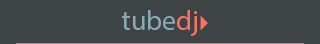
<style>
.page{position:relative;width:320px;height:44px;background:#3e4346}
.page>*{position:absolute;margin:0}
.t1{font:28px "MyriadPro-Regular";color:#89a9b4}
.t2{font:28px "MyriadPro-Regular";color:#fb7363}
</style>
<div class="page">
<p class="t1" style="left:122px;top:10px;width:75px;height:26px">tube<span class="t2">dj</span></p>
</div>
